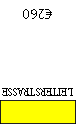
<style>
.page{position:relative;width:76px;height:124px;background:#ffffff}
.page>*{position:absolute;margin:0}
.t1{font:14px "MyriadPro-Regular";color:#000000}
.t2{font:12px "AdobeDevanagari-Regular";color:#000000;scale:0.9 1}
</style>
<div class="page">
<p class="t1" style="left:23px;top:9px;width:29px;height:10px;rotate:180deg">€260</p>
<p class="t2" style="left:2px;top:88px;width:71px;height:8px;rotate:180deg">LEITERSTRASSE</p>
</div>
